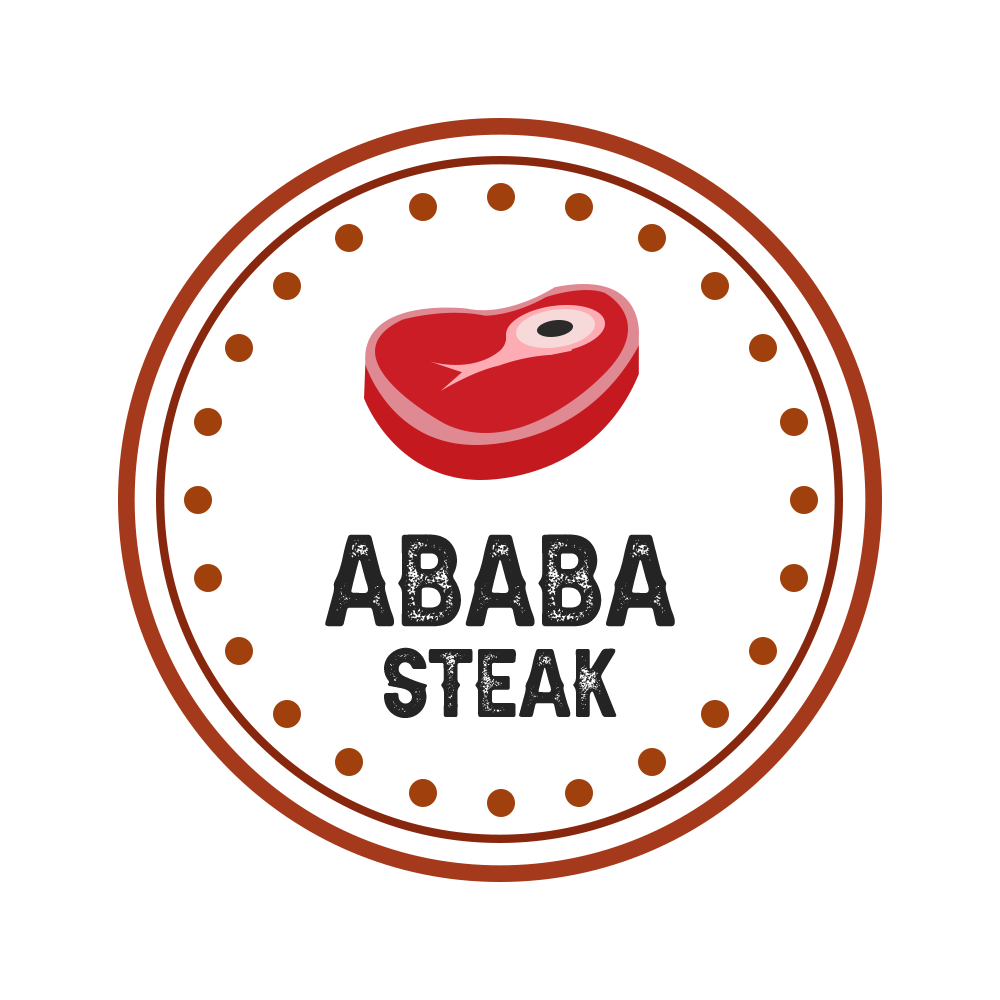
<style>
.page{position:relative;width:1000px;height:1000px;background:#ffffff}
.page>*{position:absolute;margin:0}
.t1{font:79.9px "AldivaroStampDemo-Stamp";color:#242424}
.t2{font:59.4px "AldivaroStampDemo-Stamp";color:#242424}
</style>
<div class="page">
<p class="t1" style="left:325px;top:534px;width:350px;height:93px">ABABA</p>
<p class="t2" style="left:384px;top:647px;width:233px;height:71px">Steak</p>
</div>
